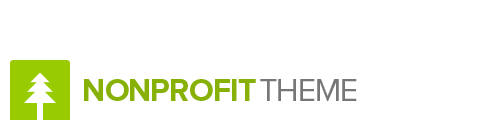
<style>
.page{position:relative;width:480px;height:120px;background:#ffffff}
.page>*{position:absolute;margin:0}
.t1{font:32px "ProximaNova-Bold";letter-spacing:-0.025em;color:#87b107;text-transform:uppercase}
.t2{font:32px "ProximaNova-Regular";letter-spacing:-0.025em;color:#777777;text-transform:uppercase}
</style>
<div class="page">
<p class="t1" style="left:84px;top:79px;width:273px;height:22px">NonProfit<span class="t2">Theme</span></p>
</div>
